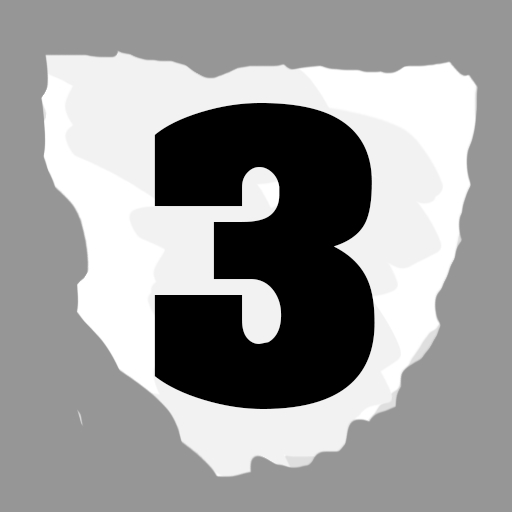
<style>
.page{position:relative;width:512px;height:512px;background:#979696}
.page>*{position:absolute;margin:0}
.t1{font:453.9px "VNI-Auchon-Bold";letter-spacing:-0.015em;color:#000000}
</style>
<div class="page">
<p class="t1" style="left:154px;top:103px;width:221px;height:306px">3</p>
</div>
